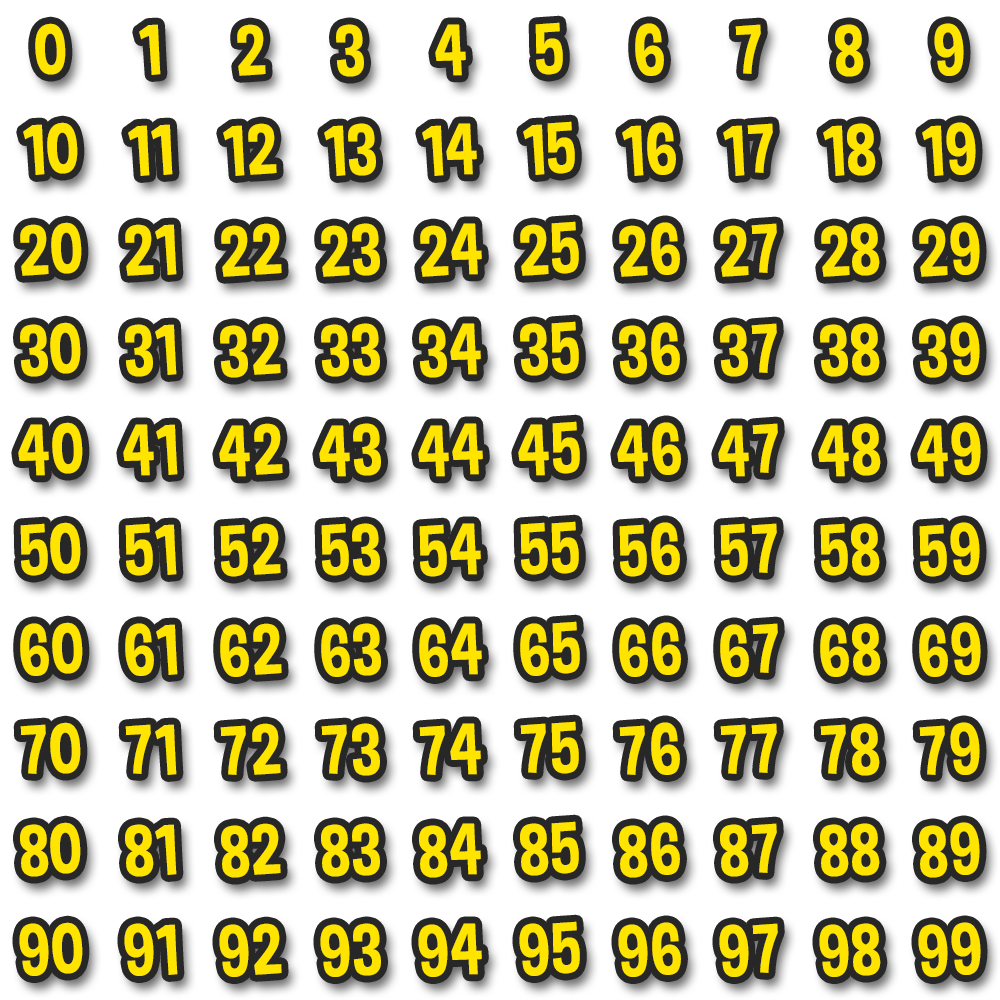
<style>
.page{position:relative;width:1000px;height:1000px;background:#ffffff}
.page>*{position:absolute;margin:0}
.t1{font:72px "DimboRegular";letter-spacing:0.025em;color:#ffe400;text-transform:uppercase}
</style>
<div class="page">
<p class="t1" style="left:35px;top:23px;width:31px;height:52px;rotate:-3deg">0</p>
<p class="t1" style="left:139px;top:24px;width:22px;height:51px;rotate:-3deg">1</p>
<p class="t1" style="left:237px;top:24px;width:29px;height:52px;rotate:-3deg">2</p>
<p class="t1" style="left:336px;top:24px;width:28px;height:53px;rotate:-3deg">3</p>
<p class="t1" style="left:435px;top:24px;width:31px;height:52px;rotate:-3deg">4</p>
<p class="t1" style="left:535px;top:22px;width:28px;height:53px;rotate:-3deg">5</p>
<p class="t1" style="left:635px;top:23px;width:29px;height:53px;rotate:-3deg">6</p>
<p class="t1" style="left:735px;top:24px;width:26px;height:50px;rotate:-3deg">7</p>
<p class="t1" style="left:835px;top:24px;width:29px;height:53px;rotate:-3deg">8</p>
<p class="t1" style="left:934px;top:23px;width:30px;height:53px;rotate:-3deg">9</p>
<p class="t1" style="left:23px;top:122px;width:55px;height:53px;rotate:-3deg">10</p>
<p class="t1" style="left:128px;top:124px;width:45px;height:52px;rotate:-3deg">11</p>
<p class="t1" style="left:223px;top:123px;width:54px;height:53px;rotate:-3deg">12</p>
<p class="t1" style="left:324px;top:123px;width:52px;height:53px;rotate:-3deg">13</p>
<p class="t1" style="left:422px;top:123px;width:55px;height:53px;rotate:-3deg">14</p>
<p class="t1" style="left:523px;top:121px;width:52px;height:54px;rotate:-3deg">15</p>
<p class="t1" style="left:622px;top:122px;width:54px;height:54px;rotate:-3deg">16</p>
<p class="t1" style="left:723px;top:123px;width:50px;height:53px;rotate:-3deg">17</p>
<p class="t1" style="left:823px;top:123px;width:53px;height:53px;rotate:-3deg">18</p>
<p class="t1" style="left:922px;top:122px;width:54px;height:54px;rotate:-3deg">19</p>
<p class="t1" style="left:20px;top:222px;width:62px;height:54px;rotate:-3deg">20</p>
<p class="t1" style="left:520px;top:221px;width:59px;height:55px;rotate:-3deg">25</p>
<p class="t1" style="left:619px;top:222px;width:61px;height:55px;rotate:-3deg">26</p>
<p class="t1" style="left:919px;top:222px;width:61px;height:55px;rotate:-3deg">29</p>
<p class="t1" style="left:125px;top:224px;width:52px;height:52px;rotate:-3deg">21</p>
<p class="t1" style="left:221px;top:223px;width:61px;height:54px;rotate:-3deg">22</p>
<p class="t1" style="left:321px;top:223px;width:59px;height:54px;rotate:-3deg">23</p>
<p class="t1" style="left:420px;top:223px;width:62px;height:54px;rotate:-3deg">24</p>
<p class="t1" style="left:720px;top:223px;width:57px;height:54px;rotate:-3deg">27</p>
<p class="t1" style="left:821px;top:223px;width:59px;height:54px;rotate:-3deg">28</p>
<p class="t1" style="left:20px;top:322px;width:61px;height:55px;rotate:-3deg">30</p>
<p class="t1" style="left:125px;top:324px;width:52px;height:53px;rotate:-3deg">31</p>
<p class="t1" style="left:220px;top:323px;width:61px;height:55px;rotate:-3deg">32</p>
<p class="t1" style="left:321px;top:323px;width:59px;height:54px;rotate:-3deg">33</p>
<p class="t1" style="left:419px;top:323px;width:62px;height:55px;rotate:-3deg">34</p>
<p class="t1" style="left:520px;top:321px;width:59px;height:55px;rotate:-3deg">35</p>
<p class="t1" style="left:619px;top:322px;width:61px;height:56px;rotate:-3deg">36</p>
<p class="t1" style="left:720px;top:323px;width:57px;height:54px;rotate:-3deg">37</p>
<p class="t1" style="left:820px;top:323px;width:60px;height:54px;rotate:-3deg">38</p>
<p class="t1" style="left:919px;top:322px;width:61px;height:56px;rotate:-3deg">39</p>
<p class="t1" style="left:18px;top:422px;width:65px;height:54px;rotate:-3deg">40</p>
<p class="t1" style="left:123px;top:424px;width:55px;height:52px;rotate:-3deg">41</p>
<p class="t1" style="left:219px;top:423px;width:64px;height:54px;rotate:-3deg">42</p>
<p class="t1" style="left:319px;top:423px;width:62px;height:54px;rotate:-3deg">43</p>
<p class="t1" style="left:418px;top:423px;width:65px;height:54px;rotate:-3deg">44</p>
<p class="t1" style="left:518px;top:421px;width:62px;height:55px;rotate:-3deg">45</p>
<p class="t1" style="left:617px;top:422px;width:64px;height:55px;rotate:-3deg">46</p>
<p class="t1" style="left:718px;top:423px;width:60px;height:54px;rotate:-3deg">47</p>
<p class="t1" style="left:818px;top:423px;width:63px;height:54px;rotate:-3deg">48</p>
<p class="t1" style="left:917px;top:422px;width:64px;height:55px;rotate:-3deg">49</p>
<p class="t1" style="left:520px;top:521px;width:59px;height:54px;rotate:-3deg">55</p>
<p class="t1" style="left:20px;top:522px;width:61px;height:54px;rotate:-3deg">50</p>
<p class="t1" style="left:125px;top:523px;width:52px;height:53px;rotate:-3deg">51</p>
<p class="t1" style="left:220px;top:523px;width:61px;height:54px;rotate:-3deg">52</p>
<p class="t1" style="left:321px;top:523px;width:59px;height:53px;rotate:-3deg">53</p>
<p class="t1" style="left:419px;top:523px;width:62px;height:54px;rotate:-3deg">54</p>
<p class="t1" style="left:619px;top:522px;width:61px;height:55px;rotate:-3deg">56</p>
<p class="t1" style="left:720px;top:523px;width:57px;height:53px;rotate:-3deg">57</p>
<p class="t1" style="left:820px;top:523px;width:60px;height:53px;rotate:-3deg">58</p>
<p class="t1" style="left:919px;top:522px;width:61px;height:55px;rotate:-3deg">59</p>
<p class="t1" style="left:20px;top:622px;width:63px;height:54px;rotate:-3deg">60</p>
<p class="t1" style="left:125px;top:623px;width:53px;height:53px;rotate:-3deg">61</p>
<p class="t1" style="left:220px;top:623px;width:62px;height:54px;rotate:-3deg">62</p>
<p class="t1" style="left:321px;top:623px;width:60px;height:54px;rotate:-3deg">63</p>
<p class="t1" style="left:419px;top:623px;width:63px;height:54px;rotate:-3deg">64</p>
<p class="t1" style="left:520px;top:621px;width:60px;height:55px;rotate:-3deg">65</p>
<p class="t1" style="left:619px;top:622px;width:62px;height:55px;rotate:-3deg">66</p>
<p class="t1" style="left:720px;top:623px;width:58px;height:54px;rotate:-3deg">67</p>
<p class="t1" style="left:820px;top:623px;width:61px;height:54px;rotate:-3deg">68</p>
<p class="t1" style="left:919px;top:622px;width:62px;height:55px;rotate:-3deg">69</p>
<p class="t1" style="left:20px;top:722px;width:61px;height:52px;rotate:-3deg">70</p>
<p class="t1" style="left:125px;top:724px;width:52px;height:51px;rotate:-3deg">71</p>
<p class="t1" style="left:220px;top:723px;width:61px;height:52px;rotate:-3deg">72</p>
<p class="t1" style="left:321px;top:723px;width:59px;height:53px;rotate:-3deg">73</p>
<p class="t1" style="left:419px;top:723px;width:62px;height:52px;rotate:-3deg">74</p>
<p class="t1" style="left:520px;top:721px;width:59px;height:53px;rotate:-3deg">75</p>
<p class="t1" style="left:619px;top:722px;width:61px;height:53px;rotate:-3deg">76</p>
<p class="t1" style="left:720px;top:723px;width:57px;height:51px;rotate:-3deg">77</p>
<p class="t1" style="left:820px;top:723px;width:60px;height:53px;rotate:-3deg">78</p>
<p class="t1" style="left:919px;top:722px;width:61px;height:53px;rotate:-3deg">79</p>
<p class="t1" style="left:20px;top:822px;width:61px;height:55px;rotate:-3deg">80</p>
<p class="t1" style="left:520px;top:821px;width:59px;height:55px;rotate:-3deg">85</p>
<p class="t1" style="left:619px;top:822px;width:61px;height:56px;rotate:-3deg">86</p>
<p class="t1" style="left:919px;top:822px;width:61px;height:56px;rotate:-3deg">89</p>
<p class="t1" style="left:125px;top:824px;width:52px;height:53px;rotate:-3deg">81</p>
<p class="t1" style="left:221px;top:823px;width:60px;height:55px;rotate:-3deg">82</p>
<p class="t1" style="left:321px;top:823px;width:59px;height:54px;rotate:-3deg">83</p>
<p class="t1" style="left:419px;top:823px;width:62px;height:55px;rotate:-3deg">84</p>
<p class="t1" style="left:720px;top:823px;width:57px;height:54px;rotate:-3deg">87</p>
<p class="t1" style="left:820px;top:823px;width:60px;height:54px;rotate:-3deg">88</p>
<p class="t1" style="left:19px;top:922px;width:64px;height:54px;rotate:-3deg">90</p>
<p class="t1" style="left:124px;top:923px;width:54px;height:53px;rotate:-3deg">91</p>
<p class="t1" style="left:219px;top:923px;width:63px;height:54px;rotate:-3deg">92</p>
<p class="t1" style="left:320px;top:923px;width:61px;height:54px;rotate:-3deg">93</p>
<p class="t1" style="left:418px;top:923px;width:64px;height:54px;rotate:-3deg">94</p>
<p class="t1" style="left:519px;top:921px;width:61px;height:55px;rotate:-3deg">95</p>
<p class="t1" style="left:618px;top:922px;width:63px;height:55px;rotate:-3deg">96</p>
<p class="t1" style="left:719px;top:923px;width:59px;height:54px;rotate:-3deg">97</p>
<p class="t1" style="left:819px;top:923px;width:62px;height:54px;rotate:-3deg">98</p>
<p class="t1" style="left:918px;top:922px;width:63px;height:55px;rotate:-3deg">99</p>
</div>
